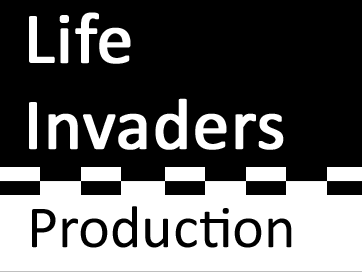
<style>
.page{position:relative;width:362px;height:272px;background:#000000}
.page>*{position:absolute;margin:0}
.t1{font:72.4px "Calibri";color:#ffffff;font-weight:bold}
.t2{font:60.3px "Calibri";color:#000000}
</style>
<div class="page">
<p class="t1" style="left:29px;top:12px;width:255px;height:138px">Life<br>Invaders</p>
<p class="t2" style="left:32px;top:206px;width:260px;height:42px">Production</p>
</div>
